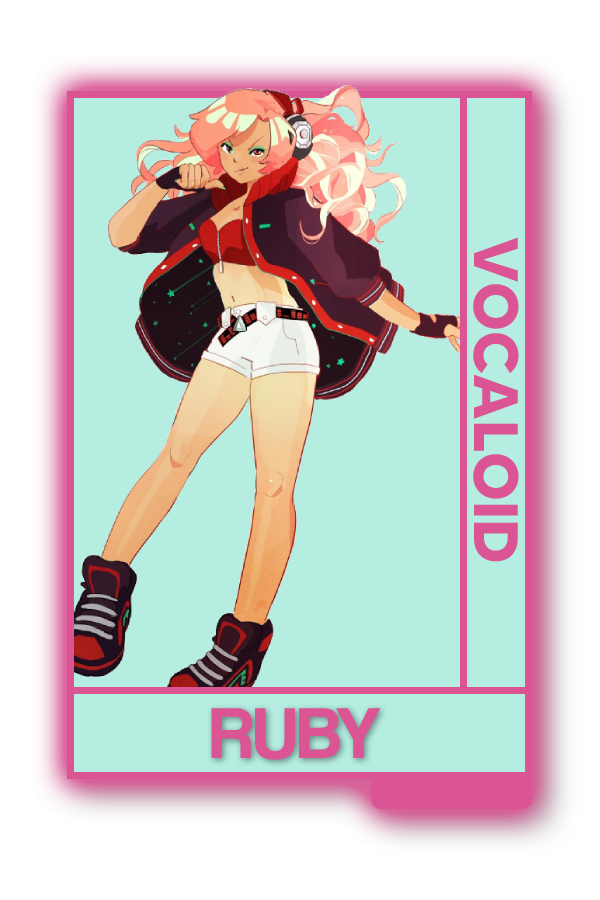
<style>
.page{position:relative;width:600px;height:900px;background:#b5ede1}
.page>*{position:absolute;margin:0}
.t1{font:62.5px "MADETOMMY-Bold";color:#db5493}
.t2{font:75px "CoolveticaRg-Regular";color:#db5493}
</style>
<div class="page">
<p class="t1" style="left:473px;top:237px;width:46px;height:325px;rotate:90deg">VOCALOID</p>
<p class="t2" style="left:211px;top:708px;width:170px;height:52px">RUBY</p>
</div>
